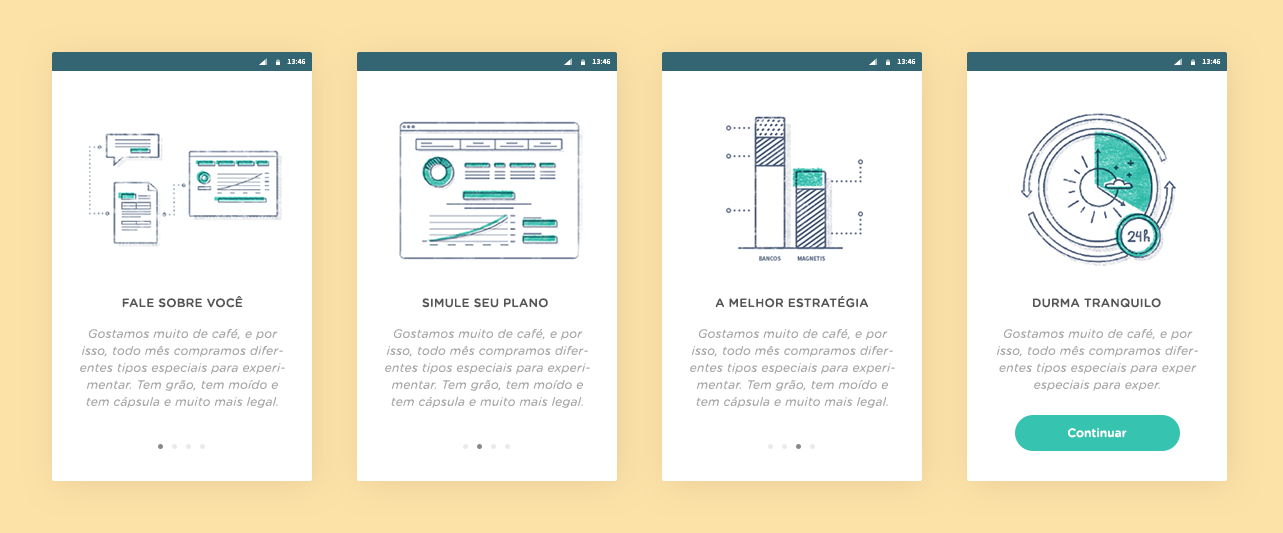
<style>
.page{position:relative;width:1283px;height:533px;background:#ffffff}
.page>*{position:absolute;margin:0}
.t1{font:12px "GothamRounded-Medium";letter-spacing:0.02em;color:#545555}
.t2{font:12px/17px "GothamRounded-BookItalic";letter-spacing:0.02em;color:#a7a7a7}
.t3{font:12px "GothamRounded-Medium";color:#ffffff}
</style>
<div class="page">
<p class="t1" style="left:122px;top:296px;width:121px;height:12px">FALE SOBRE VOCÊ</p>
<p class="t1" style="left:422px;top:298px;width:126px;height:10px">SIMULE SEU PLANO</p>
<p class="t1" style="left:715px;top:296px;width:154px;height:12px">A MELHOR ESTRATÉGIA</p>
<p class="t1" style="left:1033px;top:298px;width:128px;height:10px">DURMA TRANQUILO</p>
<p class="t2" style="left:80px;top:329px;width:205px;height:79px;text-align:center">Gostamos muito de café, e por isso, todo mês compramos diferentes tipos especiais para experimentar. Tem grão, tem moído e tem cápsula e muito mais legal.</p>
<p class="t2" style="left:385px;top:329px;width:205px;height:79px;text-align:center">Gostamos muito de café, e por isso, todo mês compramos diferentes tipos especiais para experimentar. Tem grão, tem moído e tem cápsula e muito mais legal.</p>
<p class="t2" style="left:690px;top:329px;width:205px;height:79px;text-align:center">Gostamos muito de café, e por isso, todo mês compramos diferentes tipos especiais para experimentar. Tem grão, tem moído e tem cápsula e muito mais legal.</p>
<p class="t2" style="left:997px;top:329px;width:201px;height:62px;text-align:center">Gostamos muito de café, e por isso, todo mês compramos diferentes tipos especiais para exper especiais para exper.</p>
<p class="t3" style="left:1068px;top:428px;width:59px;height:10px">Continuar</p>
</div>
